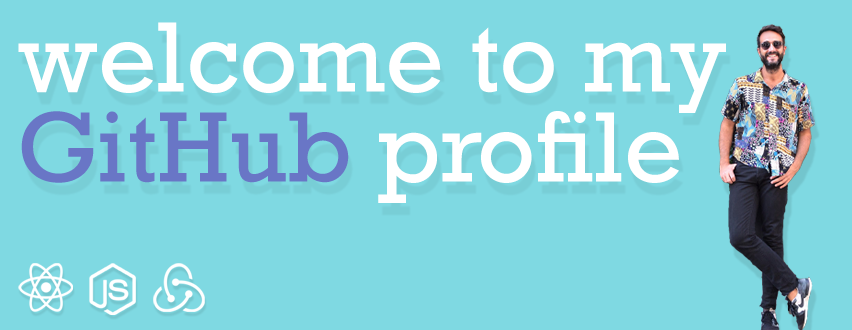
<style>
.page{position:relative;width:852px;height:330px;background:#7fd9e2}
.page>*{position:absolute;margin:0}
.t1{font:93.8px/90px "Rockwell-Regular";color:#ffffff}
.t2{font:93.8px/90px "Rockwell-Regular";color:#6976c6}
</style>
<div class="page">
<p class="t1" style="left:18px;top:22px;width:708px;height:181px">welcome to my <br><span class="t2">GitHub </span>profile</p>
</div>
